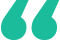
<style>
.page{position:relative;width:60px;height:40px;background:#1bbc9b}
.page>*{position:absolute;margin:0}
.t1{font:200px "Montserrat-Regular";color:#1bbc9b}
</style>
<div class="page">
<p class="t1" style="left:1px;top:0px;width:59px;height:40px">“</p>
</div>
